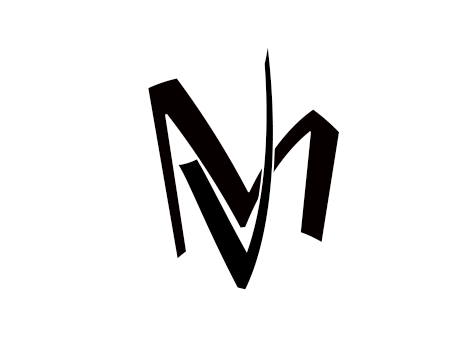
<style>
.page{position:relative;width:454px;height:340px;background:#ffffff}
.page>*{position:absolute;margin:0}
.t1{font:200px "OriyaMN";color:#000000}
.t2{font:200px "OriyaMN";color:#070000}
</style>
<div class="page">
<p class="t1" style="left:178px;top:47px;width:95px;height:243px">V</p>
<p class="t2" style="left:148px;top:78px;width:191px;height:181px">M</p>
</div>
